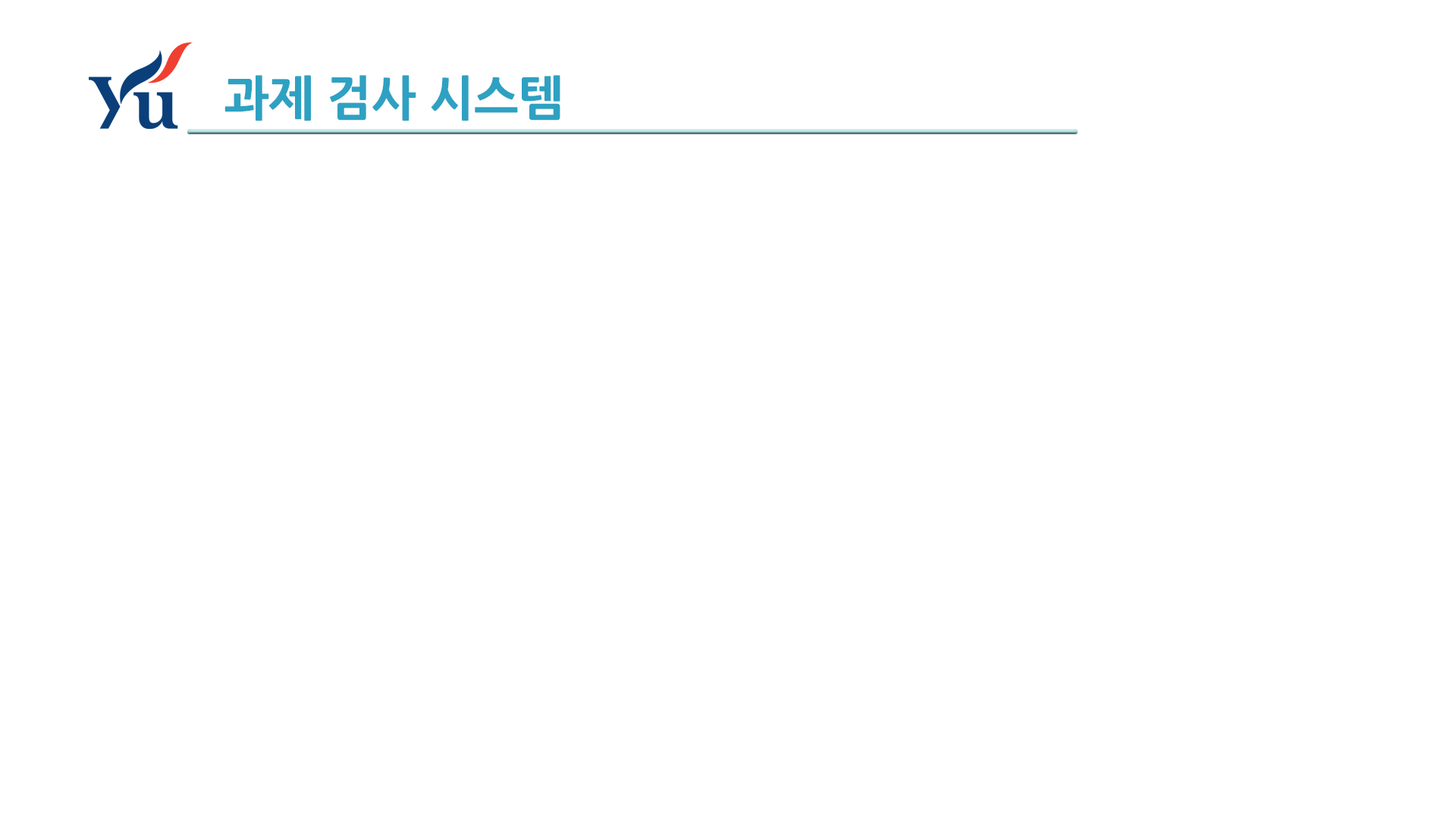
<style>
.page{position:relative;width:1456px;height:819px;background:#ffffff}
.page>*{position:absolute;margin:0}
.t1{font:47.4px "NanumGothicExtraBold";color:#2ea1c2}
</style>
<div class="page">
<p class="t1" style="left:224px;top:75px;width:336px;height:46px">과제 검사 시스템</p>
</div>
